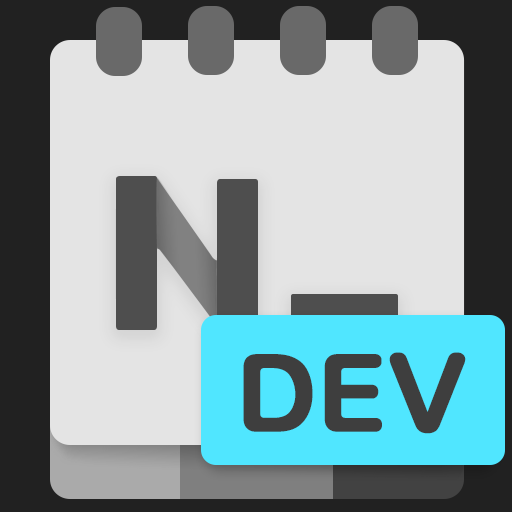
<style>
.page{position:relative;width:512px;height:512px;background:#e4e4e4}
.page>*{position:absolute;margin:0}
.t1{font:99.2px "NudMotoyaMaruW55-W5";color:#3e3e3e;font-weight:bold}
</style>
<div class="page">
<p class="t1" style="left:243px;top:352px;width:223px;height:82px">DEV</p>
</div>
